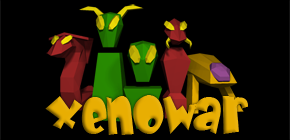
<style>
.page{position:relative;width:290px;height:140px;background:#000000}
.page>*{position:absolute;margin:0}
.t1{font:45.4px "BabyKruffy";letter-spacing:0.05em;color:#e8ae02}
</style>
<div class="page">
<p class="t1" style="left:45px;top:95px;width:203px;height:40px">Xenowar</p>
</div>
